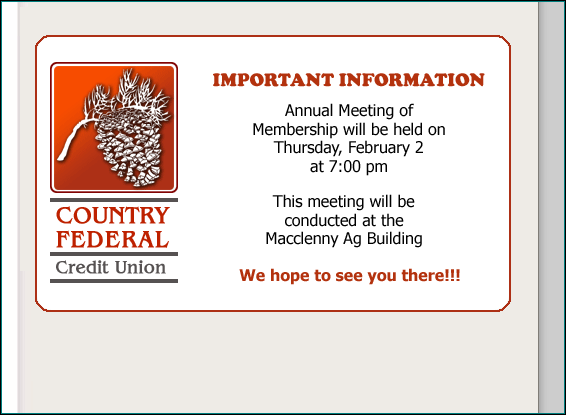
<style>
.page{position:relative;width:566px;height:415px;background:#ffffff}
.page>*{position:absolute;margin:0}
.t1{font:18.7px "CooperBlack";color:#b3320e}
.t2{font:16px/18.7px "Tahoma";color:#000000}
.t3{font:16px "Tahoma-Bold";color:#b3320e}
</style>
<div class="page">
<p class="t1" style="left:213px;top:73px;width:272px;height:14px">IMPORTANT INFORMATION</p>
<p class="t2" style="left:253px;top:103px;width:192px;height:73px;text-align:center">Annual Meeting of<br>Membership will be held on <br>Thursday, February 2<br>at 7:00 pm</p>
<p class="t2" style="left:266px;top:194px;width:156px;height:54px;text-align:center">This meeting will be<br>conducted at the <br>Macclenny Ag Building</p>
<p class="t3" style="left:239px;top:268px;width:221px;height:17px">We hope to see you there!!!</p>
</div>
